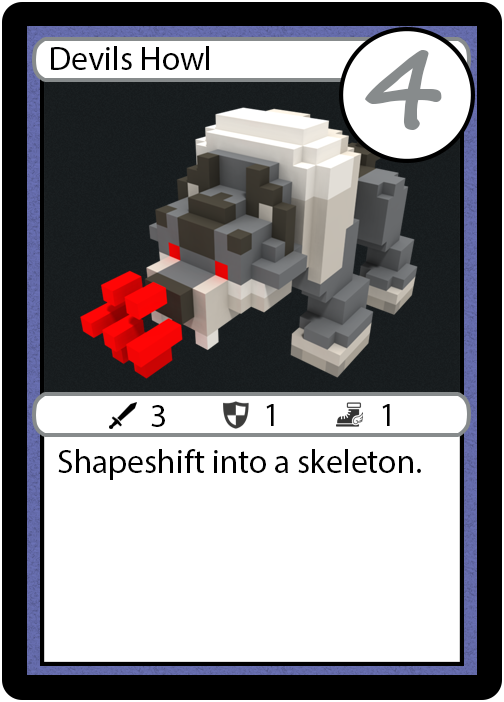
<style>
.page{position:relative;width:504px;height:702px;background:#ffffff}
.page>*{position:absolute;margin:0}
.t1{font:33.3px "MyriadPro-Regular";color:#000000}
.t2{font:111px "SegoeScript-Bold";color:#878b8c}
</style>
<div class="page">
<p class="t1" style="left:51px;top:46px;width:158px;height:24px">Devils Howl</p>
<p class="t2" style="left:365px;top:50px;width:77px;height:80px">4</p>
<p class="t1" style="left:151px;top:405px;width:14px;height:22px">3</p>
<p class="t1" style="left:266px;top:404px;width:8px;height:22px">1</p>
<p class="t1" style="left:382px;top:404px;width:8px;height:22px">1</p>
<p class="t1" style="left:58px;top:449px;width:363px;height:31px">Shapeshift into a skeleton.</p>
</div>
